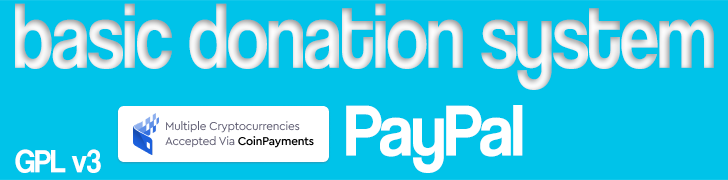
<style>
.page{position:relative;width:728px;height:180px;background:#00c3e9}
.page>*{position:absolute;margin:0}
.t1{font:95.3px "CoolveticaRg-Regular";letter-spacing:-0.02em;color:#eaeaea;scale:0.81 1}
.t2{font:75px "CoolveticaRg-Regular";letter-spacing:-0.02em;color:#ffffff;scale:0.92 1}
.t3{font:33.1px "CoolveticaRg-Regular";letter-spacing:-0.02em;color:#ffffff;scale:0.92 1}
</style>
<div class="page">
<p class="t1" style="left:15px;top:3px;width:699px;height:87px">basic donation system</p>
<p class="t2" style="left:346px;top:105px;width:177px;height:68px">PayPal</p>
<p class="t3" style="left:15px;top:149px;width:86px;height:24px">GPL v3</p>
</div>
